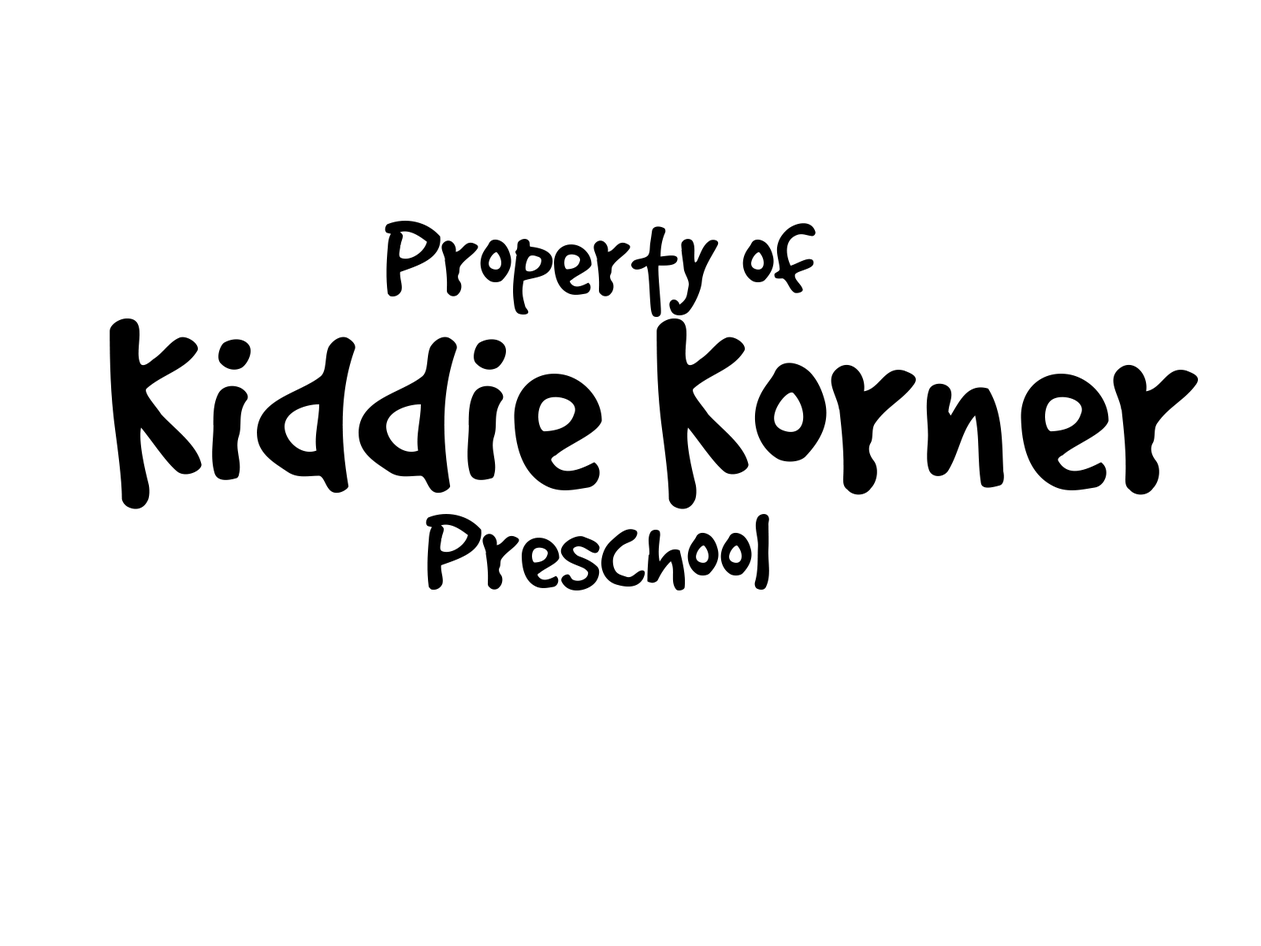
<style>
.page{position:relative;width:1261px;height:946px;background:#ffffff}
.page>*{position:absolute;margin:0}
.t1{font:118.2px/293.2px "GoodDog";color:#000000}
.t2{font:275.8px "GoodDog";color:#000000}
</style>
<div class="page">
<p class="t1" style="left:385px;top:221px;width:431px;height:369px;text-align:center">Property of <br>Preschool</p>
<p class="t2" style="left:110px;top:318px;width:1088px;height:191px">Kiddie Korner</p>
</div>
